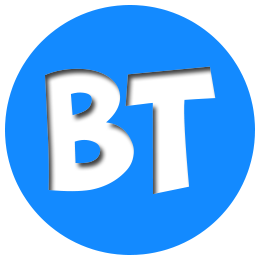
<style>
.page{position:relative;width:260px;height:260px;background:#138aff}
.page>*{position:absolute;margin:0}
.t1{font:120px "ObelixPro";letter-spacing:-0.06em;color:#ffffff}
</style>
<div class="page">
<p class="t1" style="left:45px;top:66px;width:171px;height:129px">BT</p>
</div>
